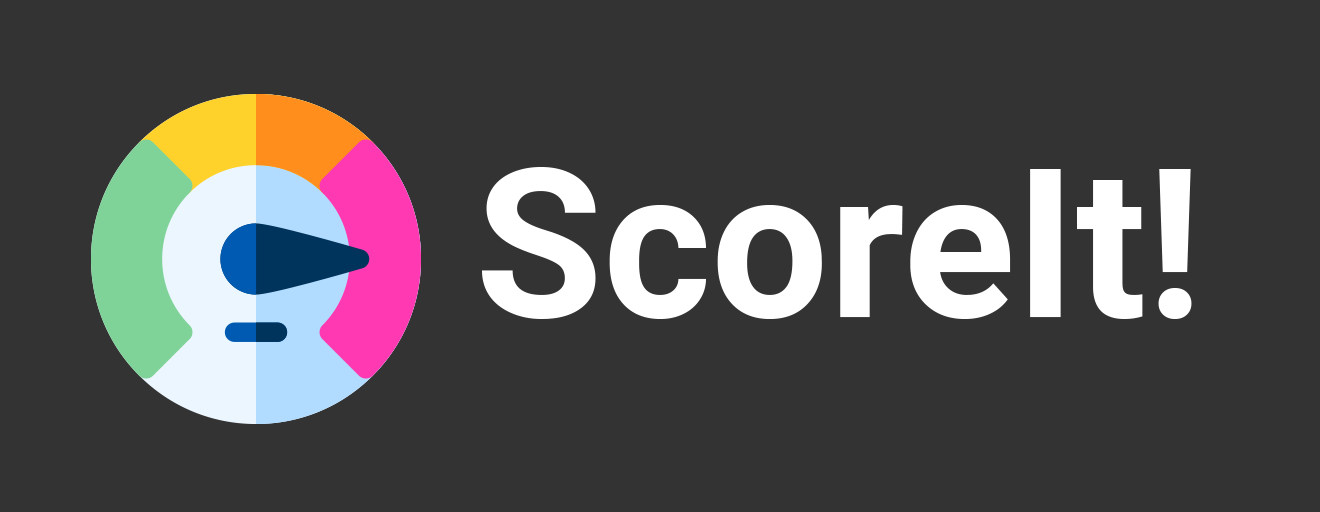
<style>
.page{position:relative;width:1320px;height:512px;background:#333333}
.page>*{position:absolute;margin:0}
.t1{font:207.9px "Roboto-Bold";color:#ffffff}
</style>
<div class="page">
<p class="t1" style="left:482px;top:167px;width:710px;height:152px">ScoreIt!</p>
</div>
